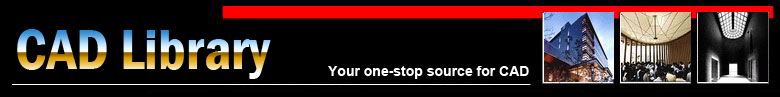
<style>
.page{position:relative;width:780px;height:97px;background:#000000}
.page>*{position:absolute;margin:0}
.t1{font:58px "FranklinGothic-DemiCond"}
.t2{font:14px "Arial-BoldMT";color:#ffffff}
</style>
<div class="page">
<p class="t1" style="left:17px;top:29px;width:254px;height:50px">CAD Library</p>
<p class="t2" style="left:328px;top:66px;width:201px;height:13px">Your one-stop source for CAD</p>
</div>
